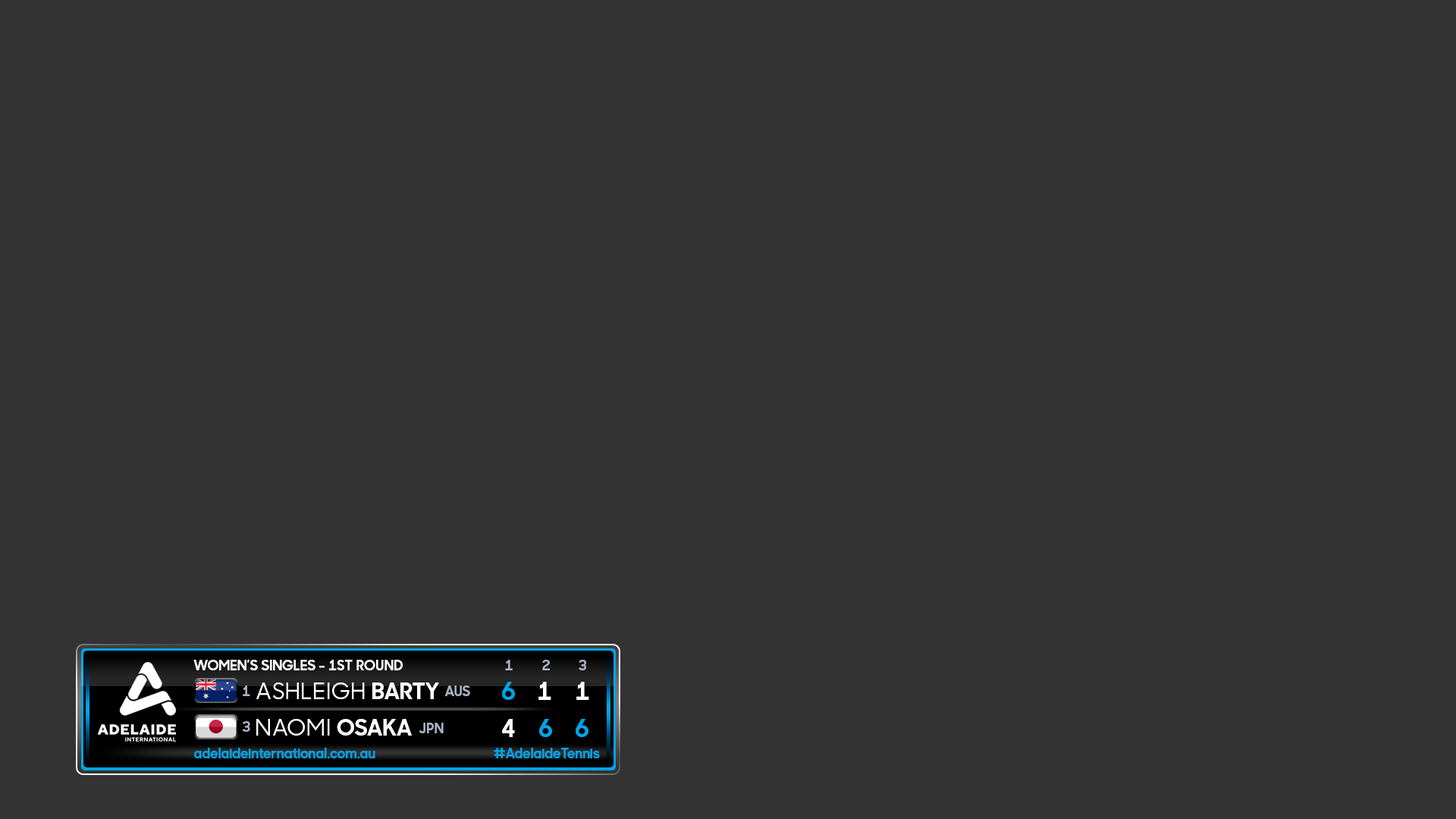
<style>
.page{position:relative;width:1456px;height:819px;background:#333333}
.page>*{position:absolute;margin:0}
.t1{font:14.2px "SharpSansNoOne-Bold";color:#ffffff}
.t2{font:14.2px "SharpSansNoOne-Bold";color:#a9b1c3}
.t3{font:14.1px "SharpSansNoOne-Bold";color:#a9b1c3}
.t4{font:22.7px "SharpSansNoOne-Medium";color:#ffffff}
.t5{font:22.7px "SharpSansNoOne-Bold";color:#ffffff}
.t6{font:24.3px "SharpSansNoOne-Bold";color:#00a4e6}
.t7{font:24.3px "SharpSansNoOne-Bold";color:#ffffff}
.t8{font:14.1px "SharpSansNoOne-Bold";color:#00a4e6}
</style>
<div class="page">
<p class="t1" style="left:193px;top:660px;width:210px;height:10px">WOMEN’S SINGLES - 1ST ROUND</p>
<p class="t2" style="left:505px;top:660px;width:8px;height:10px">1</p>
<p class="t2" style="left:542px;top:660px;width:8px;height:10px">2</p>
<p class="t2" style="left:579px;top:660px;width:7px;height:10px">3</p>
<p class="t3" style="left:243px;top:686px;width:7px;height:10px">1</p>
<p class="t4" style="left:256px;top:682px;width:183px;height:17px">ASHLEIGH <span class="t5">BARTY</span></p>
<p class="t3" style="left:444px;top:686px;width:26px;height:10px">AUS</p>
<p class="t6" style="left:502px;top:682px;width:13px;height:18px">6</p>
<p class="t7" style="left:538px;top:682px;width:13px;height:18px">1</p>
<p class="t7" style="left:576px;top:682px;width:13px;height:18px">1</p>
<p class="t3" style="left:242px;top:721px;width:8px;height:11px">3</p>
<p class="t4" style="left:256px;top:719px;width:156px;height:17px">NAOMI <span class="t5">OSAKA</span></p>
<p class="t3" style="left:419px;top:723px;width:25px;height:10px">JPN</p>
<p class="t7" style="left:502px;top:719px;width:13px;height:18px">4</p>
<p class="t6" style="left:539px;top:719px;width:13px;height:18px">6</p>
<p class="t6" style="left:576px;top:719px;width:12px;height:18px">6</p>
<p class="t8" style="left:194px;top:748px;width:181px;height:10px">adelaideinternational.com.au</p>
<p class="t8" style="left:494px;top:748px;width:106px;height:10px">#AdelaideTennis</p>
</div>
